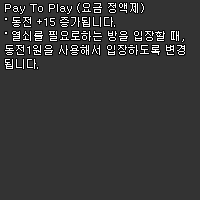
<style>
.page{position:relative;width:200px;height:200px;background:#333333}
.page>*{position:absolute;margin:0}
.t1{font:11px/14px "Dotum";color:#ffffff}
</style>
<div class="page">
<p class="t1" style="left:5px;top:3px;width:180px;height:66px">Pay To Play (요금 정액제)<br>˚ 동전 +15 증가됩니다.<br>˚ 열쇠를 필요로하는 방을 입장할 때,<br>동전1원을 사용해서 입장하도록 변경<br>됩니다.</p>
</div>
